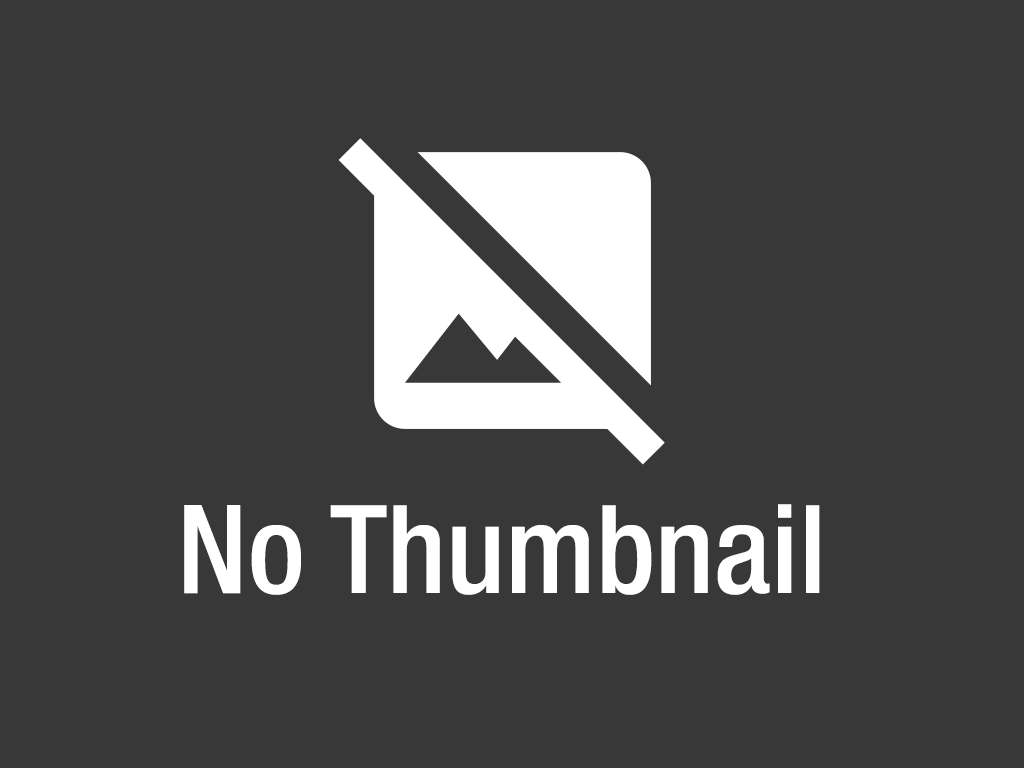
<style>
.page{position:relative;width:1024px;height:768px;background:#383838}
.page>*{position:absolute;margin:0}
.t1{font:123px "HelveticaNeue-MediumCond";color:#ffffff}
</style>
<div class="page">
<p class="t1" style="left:184px;top:504px;width:636px;height:91px">No Thumbnail</p>
</div>
